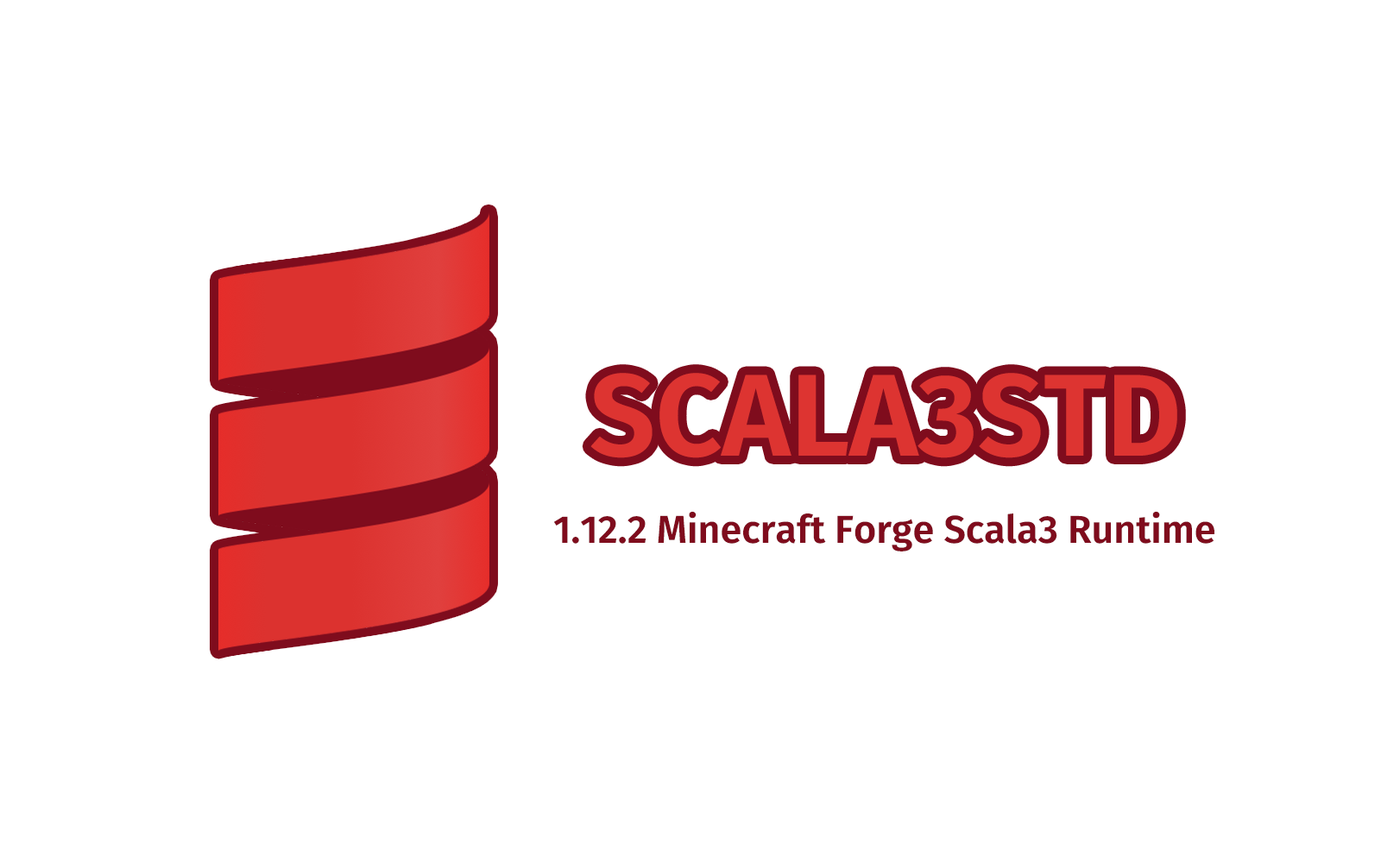
<style>
.page{position:relative;width:1381px;height:863px;background:#ffffff}
.page>*{position:absolute;margin:0}
.t1{font:107.9px "GlowSansSC-Normal-Bold";color:#dd3431}
.t2{font:36px "GlowSansSC-Normal-Bold";color:#7f0c1d}
</style>
<div class="page">
<p class="t1" style="left:590px;top:373px;width:588px;height:85px">SCALA3STD</p>
<p class="t2" style="left:553px;top:511px;width:662px;height:41px">1.12.2 Minecraft Forge Scala3 Runtime</p>
</div>
